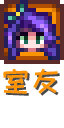
<style>
.page{position:relative;width:64px;height:128px;background:#ffffff}
.page>*{position:absolute;margin:0}
.t1{font:30px "HappyZcool-2016";color:#fa9305}
.t2{font:30px "HappyZcool-2016"}
</style>
<div class="page">
<p class="t1" style="left:3px;top:68px;width:55px;height:26px">室友</p>
<p class="t2" style="left:5px;top:70px;width:55px;height:26px">室友</p>
</div>
